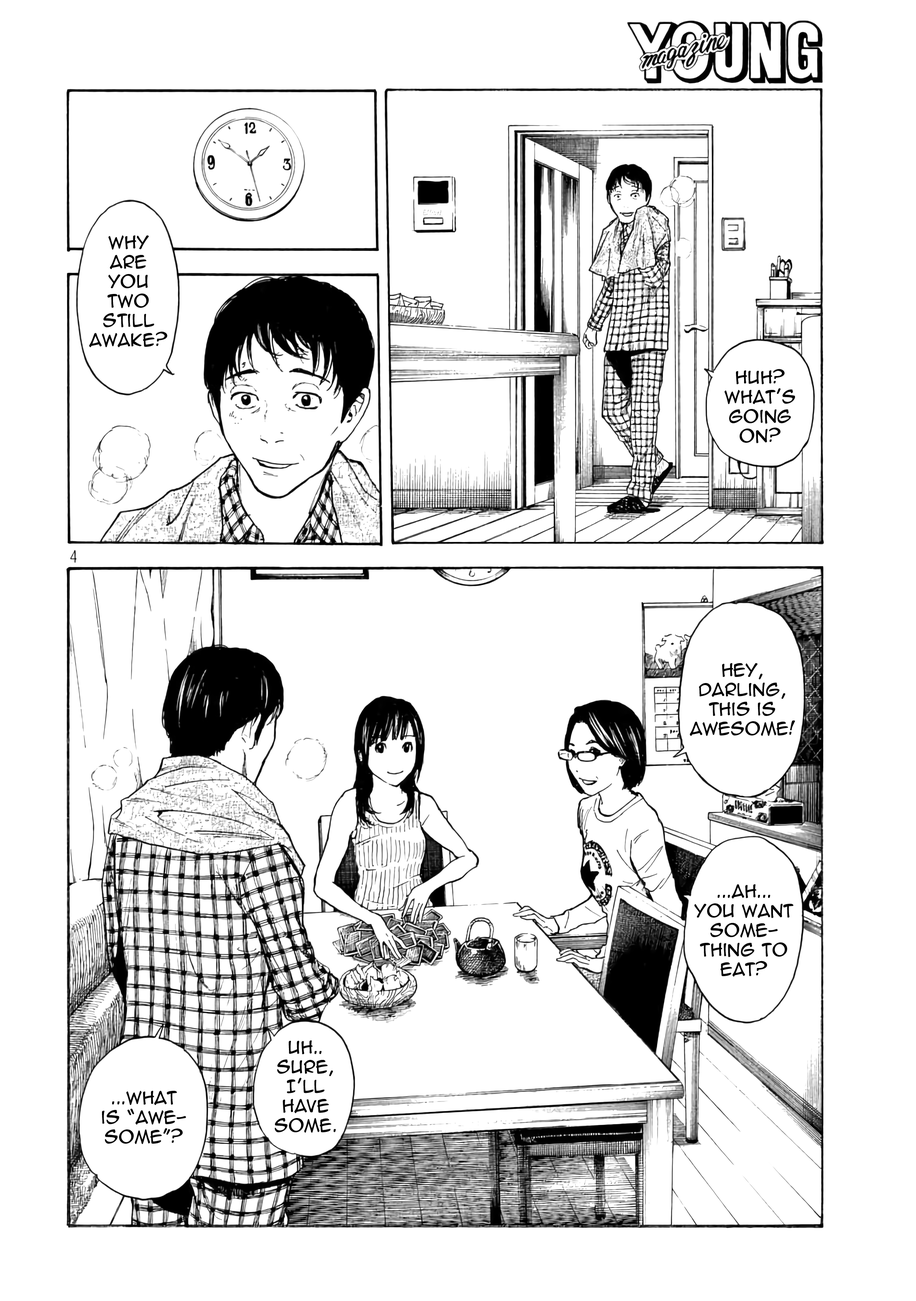
<style>
.page{position:relative;width:916px;height:1301px;background:#ffffff}
.page>*{position:absolute;margin:0}
.t1{font:16.3px "AnimeAce2.0BB";color:#000000}
</style>
<div class="page">
<p class="t1" style="left:89px;top:235px;width:79px;height:112px;text-align:center">Why are you two still awake?</p>
<p class="t1" style="left:725px;top:369px;width:71px;height:74px;text-align:center">Huh? What’s going on?</p>
<p class="t1" style="left:690px;top:663px;width:106px;height:73px;text-align:center">Hey, darling, this is awesome!</p>
<p class="t1" style="left:694px;top:884px;width:100px;height:93px;text-align:center">...ah... <br>you want some-<br>thing to eat?</p>
<p class="t1" style="left:275px;top:1040px;width:61px;height:93px;text-align:center">Uh.. sure, I’ll have some.</p>
<p class="t1" style="left:102px;top:1091px;width:84px;height:53px;text-align:center">...What <br>is “awe-<br>some”?</p>
</div>
